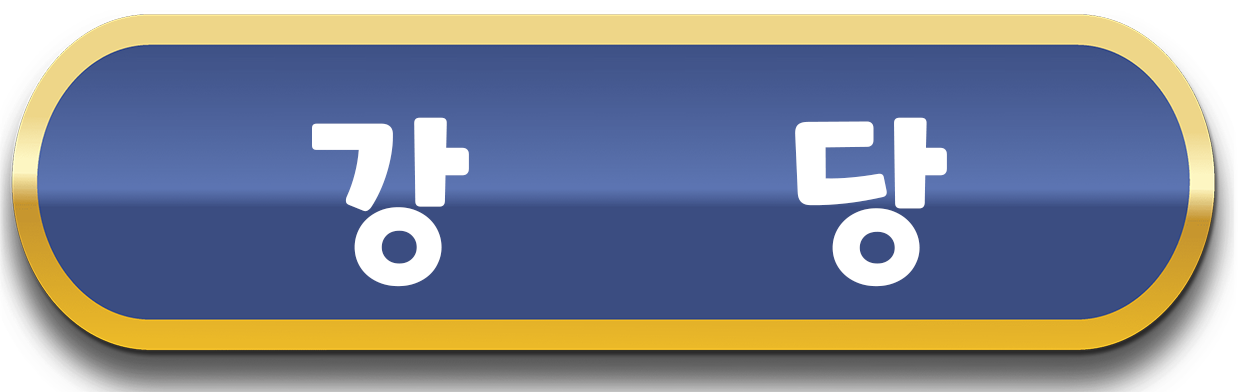
<style>
.page{position:relative;width:1244px;height:392px;background:#3b4d81}
.page>*{position:absolute;margin:0}
.t1{font:180px "ONEMobilePOPRegular";color:#ffffff}
</style>
<div class="page">
<p class="t1" style="left:312px;top:117px;width:635px;height:170px">강        당</p>
</div>
